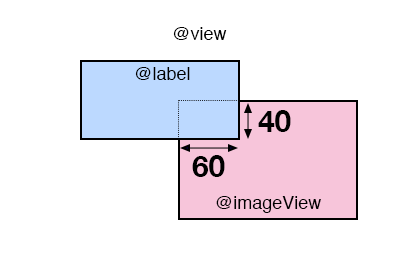
<style>
.page{position:relative;width:400px;height:280px;background:#ffffff}
.page>*{position:absolute;margin:0}
.t1{font:18px "Helvetica";color:#000000}
.t2{font:30px "HelveticaNeue-Bold";color:#000000}
</style>
<div class="page">
<p class="t1" style="left:173px;top:27px;width:54px;height:13px">@view</p>
<p class="t1" style="left:135px;top:67px;width:55px;height:13px">@label</p>
<p class="t2" style="left:258px;top:110px;width:33px;height:22px">40</p>
<p class="t2" style="left:192px;top:155px;width:33px;height:22px">60</p>
<p class="t1" style="left:216px;top:196px;width:105px;height:17px">@imageView</p>
</div>
